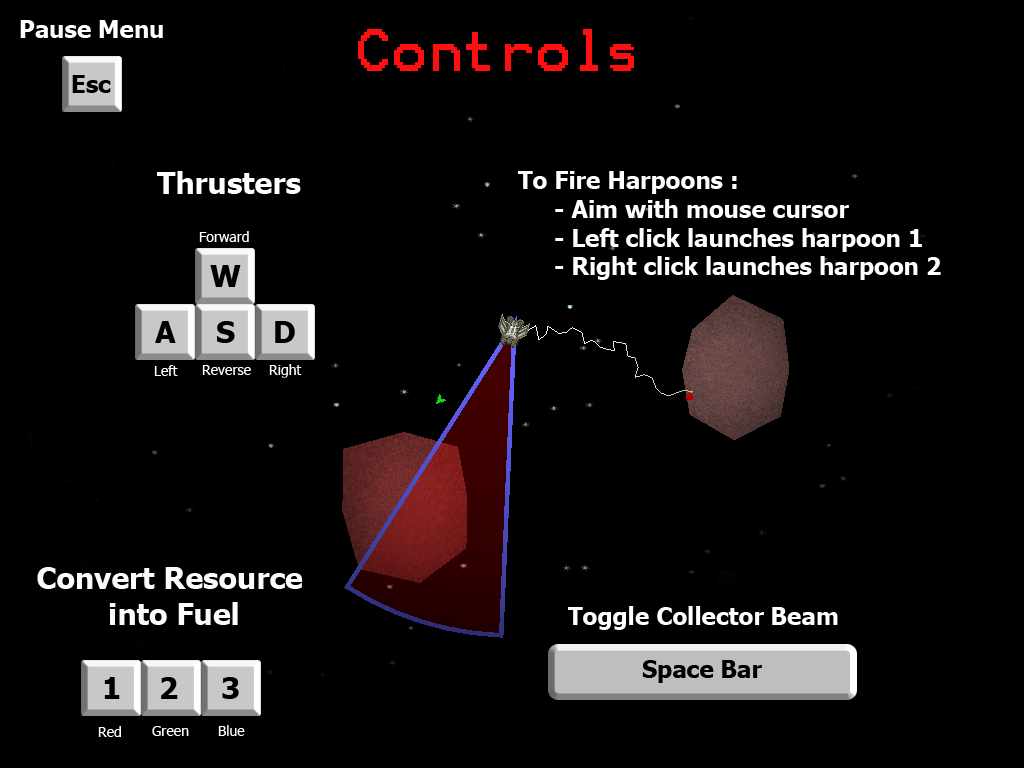
<style>
.page{position:relative;width:1024px;height:768px;background:#000000}
.page>*{position:absolute;margin:0}
.t1{font:24px "Tahoma-Bold";color:#ffffff}
.t2{font:48px "Terminal";color:#ff0f0f}
.t3{font:24px "Tahoma-Bold";color:#000000}
.t4{font:30px "Tahoma-Bold";color:#ffffff}
.t5{font:14px "Tahoma";color:#ffffff}
.t6{font:30px "Tahoma-Bold";color:#000000}
.t7{font:30px "Tahoma-Bold";color:#fbfbfb}
</style>
<div class="page">
<p class="t1" style="left:20px;top:20px;width:143px;height:18px">Pause Menu</p>
<p class="t2" style="left:358px;top:29px;width:276px;height:42px">Controls</p>
<p class="t3" style="left:72px;top:75px;width:39px;height:18px">Esc</p>
<p class="t4" style="left:157px;top:171px;width:144px;height:23px">Thrusters</p>
<p class="t1" style="left:518px;top:171px;width:423px;height:109px">To Fire Harpoons :<br> - Aim with mouse cursor<br> - Left click launches harpoon 1<br> - Right click launches harpoon 2</p>
<p class="t5" style="left:199px;top:231px;width:50px;height:11px">Forward</p>
<p class="t6" style="left:210px;top:265px;width:31px;height:22px">W</p>
<p class="t6" style="left:155px;top:321px;width:21px;height:22px">A</p>
<p class="t6" style="left:217px;top:321px;width:18px;height:22px">S</p>
<p class="t6" style="left:275px;top:321px;width:20px;height:22px">D</p>
<p class="t5" style="left:154px;top:365px;width:24px;height:11px">Left</p>
<p class="t5" style="left:202px;top:365px;width:49px;height:10px">Reverse</p>
<p class="t5" style="left:269px;top:364px;width:33px;height:14px">Right</p>
<p class="t7" style="left:37px;top:567px;width:266px;height:58px;text-align:center">Convert Resource <br>into Fuel</p>
<p class="t1" style="left:568px;top:606px;width:270px;height:24px">Toggle Collector Beam</p>
<p class="t3" style="left:642px;top:660px;width:120px;height:23px">Space Bar</p>
<p class="t6" style="left:104px;top:677px;width:16px;height:22px">1</p>
<p class="t6" style="left:161px;top:677px;width:17px;height:22px">2</p>
<p class="t6" style="left:222px;top:677px;width:17px;height:22px">3</p>
<p class="t5" style="left:98px;top:726px;width:23px;height:11px">Red</p>
<p class="t5" style="left:152px;top:726px;width:37px;height:10px">Green</p>
<p class="t5" style="left:218px;top:725px;width:27px;height:11px">Blue</p>
</div>
